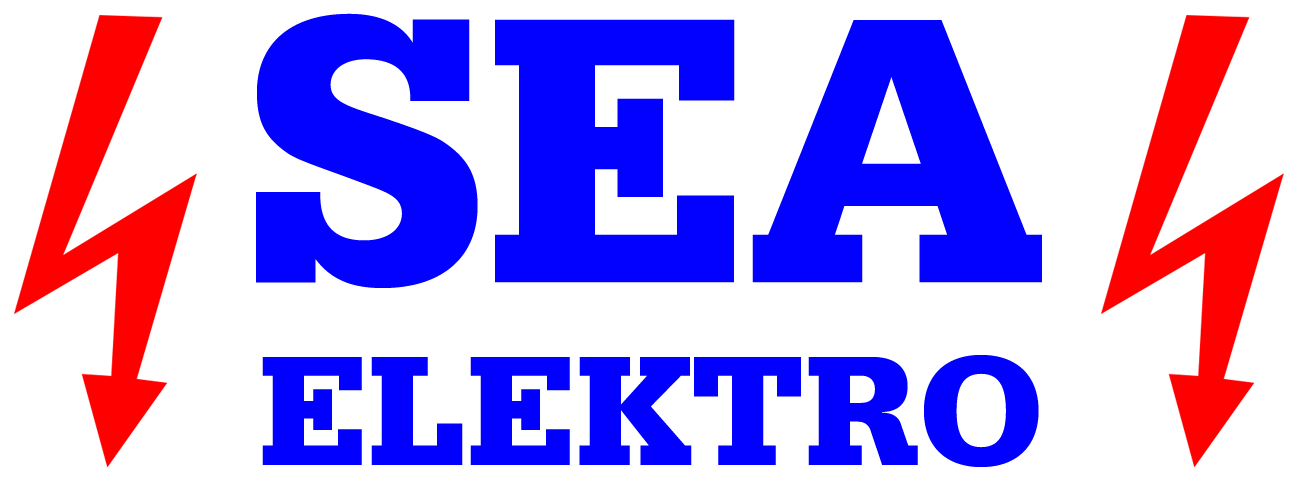
<style>
.page{position:relative;width:1298px;height:482px;background:#ffffff}
.page>*{position:absolute;margin:0}
.t1{font:399.5px "SerifaBT-Black";color:#0200ff}
.t2{font:164.7px "SerifaBT-Black";color:#0100ff}
</style>
<div class="page">
<p class="t1" style="left:256px;top:13px;width:786px;height:275px">SEA</p>
<p class="t2" style="left:262px;top:355px;width:777px;height:112px">ELEKTRO</p>
</div>
